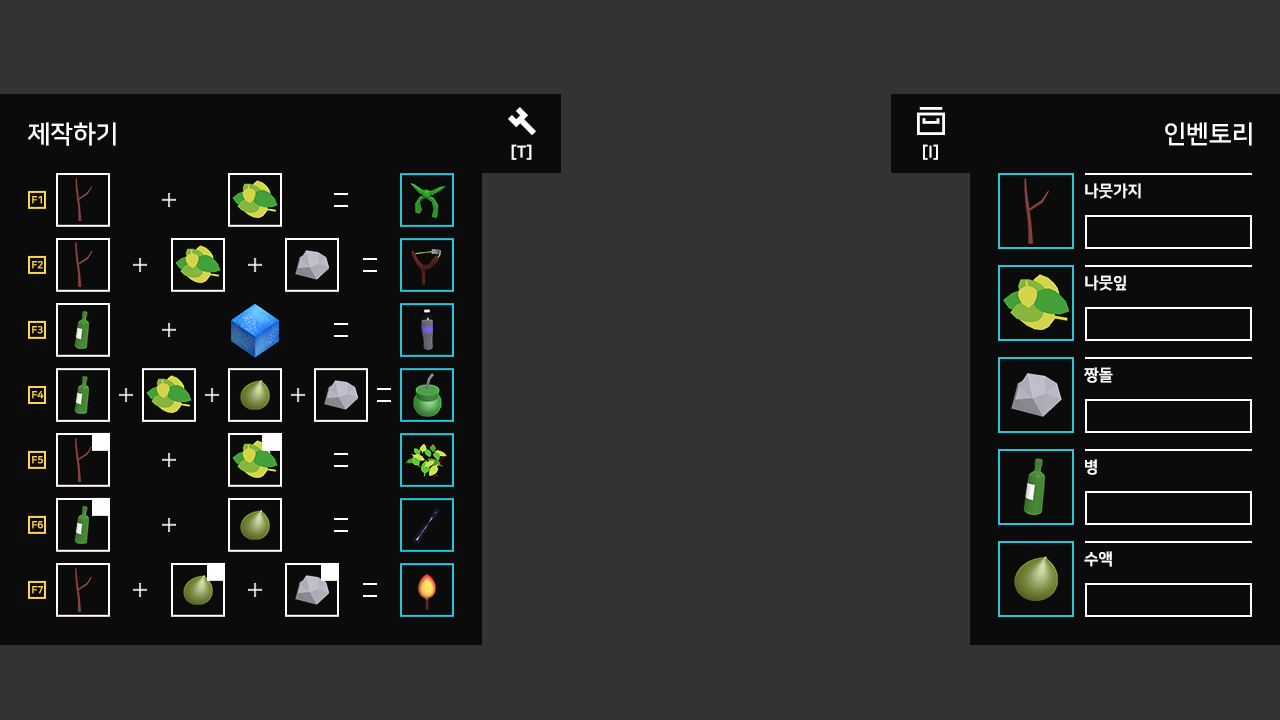
<style>
.page{position:relative;width:1280px;height:720px;background:#333333}
.page>*{position:absolute;margin:0}
.t1{font:25px "NanumSquareB";color:#ffffff}
.t2{font:16.1px "NanumSquareEB";color:#ffffff}
.t3{font:16px "NanumSquareEB";color:#ffffff}
.t4{font:10px "NanumSquareEB";color:#ffd54f}
</style>
<div class="page">
<p class="t1" style="left:27px;top:122px;width:89px;height:24px">제작하기</p>
<p class="t1" style="left:1165px;top:122px;width:87px;height:24px">인벤토리</p>
<p class="t2" style="left:511px;top:144px;width:21px;height:16px">[T]</p>
<p class="t2" style="left:923px;top:144px;width:15px;height:16px">[I]</p>
<p class="t3" style="left:1085px;top:183px;width:56px;height:16px">나뭇가지</p>
<p class="t4" style="left:32px;top:196px;width:10px;height:8px">F1</p>
<p class="t4" style="left:32px;top:261px;width:11px;height:8px">F2</p>
<p class="t3" style="left:1085px;top:275px;width:41px;height:16px">나뭇잎</p>
<p class="t4" style="left:32px;top:326px;width:11px;height:8px">F3</p>
<p class="t3" style="left:1084px;top:367px;width:29px;height:16px">짱돌</p>
<p class="t4" style="left:32px;top:391px;width:12px;height:8px">F4</p>
<p class="t4" style="left:32px;top:456px;width:11px;height:8px">F5</p>
<p class="t3" style="left:1085px;top:459px;width:12px;height:16px">병</p>
<p class="t4" style="left:32px;top:521px;width:11px;height:8px">F6</p>
<p class="t3" style="left:1084px;top:551px;width:28px;height:16px">수액</p>
<p class="t4" style="left:32px;top:586px;width:11px;height:8px">F7</p>
</div>
